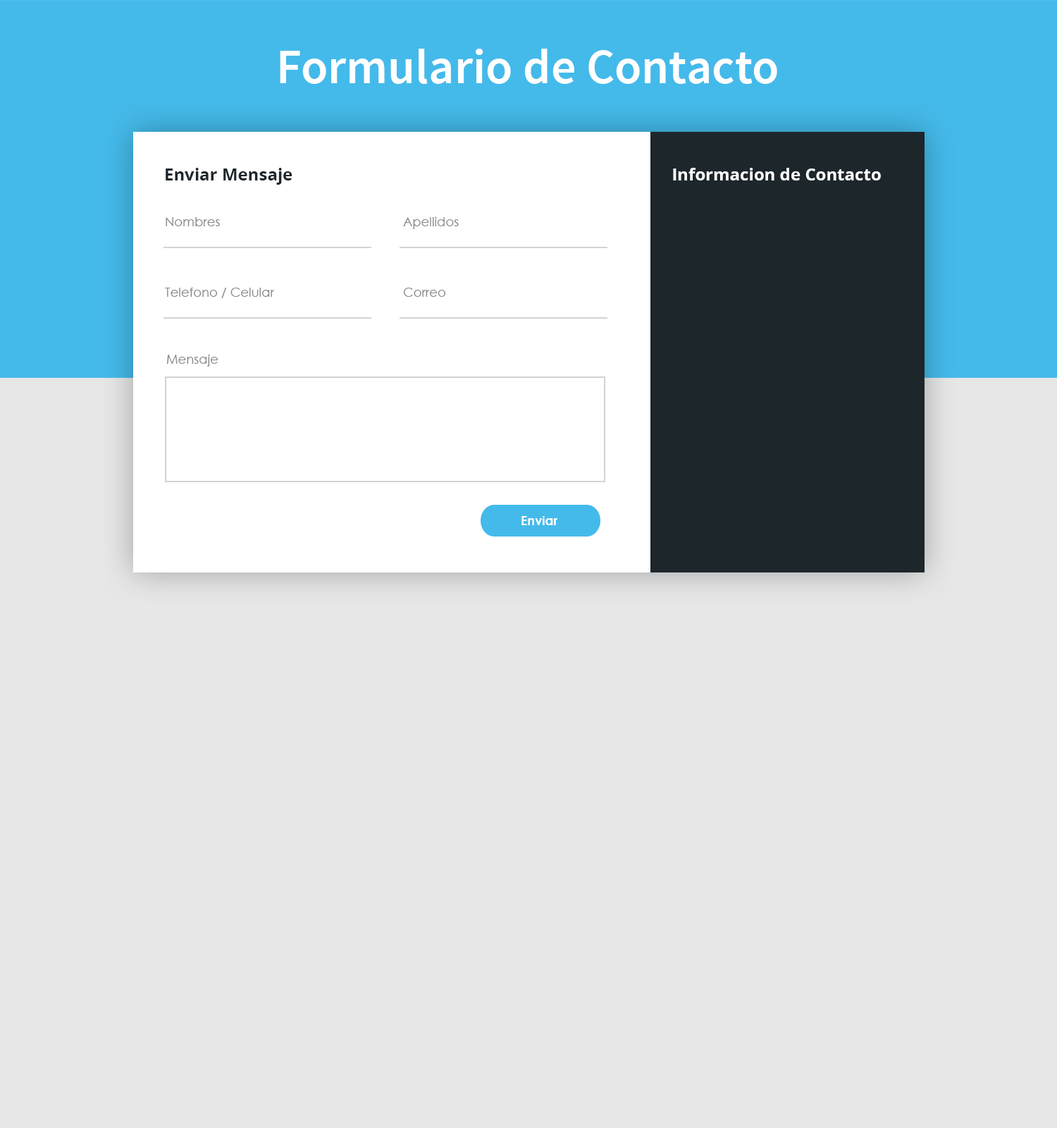
<style>
.page{position:relative;width:1057px;height:1128px;background:#e7e7e7}
.page>*{position:absolute;margin:0}
.t1{font:49.3px "SourceSansPro-Semibold";color:#ffffff}
.t2{font:16.9px "OpenSans-Bold";color:#1d262b}
.t3{font:16.9px "OpenSans-Bold";color:#ffffff}
.t4{font:12.7px "CenturyGothic";color:#898989}
.t5{font:12.7px "CenturyGothic-Bold";color:#ffffff}
</style>
<div class="page">
<p class="t1" style="left:280px;top:49px;width:497px;height:35px">Formulario de Contacto</p>
<p class="t2" style="left:166px;top:168px;width:127px;height:17px">Enviar Mensaje</p>
<p class="t3" style="left:673px;top:168px;width:208px;height:12px">Informacion de Contacto</p>
<p class="t4" style="left:166px;top:217px;width:54px;height:9px">Nombres</p>
<p class="t4" style="left:403px;top:217px;width:56px;height:12px">Apellidos</p>
<p class="t4" style="left:165px;top:288px;width:110px;height:10px">Telefono / Celular</p>
<p class="t4" style="left:403px;top:288px;width:42px;height:9px">Correo</p>
<p class="t4" style="left:166px;top:355px;width:53px;height:12px">Mensaje</p>
<p class="t5" style="left:522px;top:516px;width:36px;height:9px">Enviar</p>
</div>
